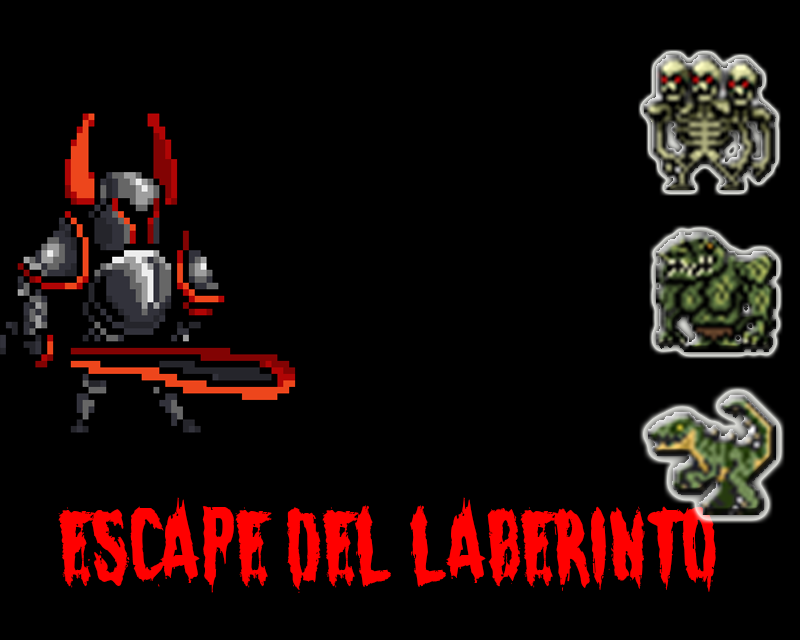
<style>
.page{position:relative;width:800px;height:640px;background:#000000}
.page>*{position:absolute;margin:0}
.t1{font:108.3px "SinisterSunday";color:#ff0000}
</style>
<div class="page">
<p class="t1" style="left:58px;top:497px;width:658px;height:96px">ESCAPE DEL LABERINTO</p>
</div>
